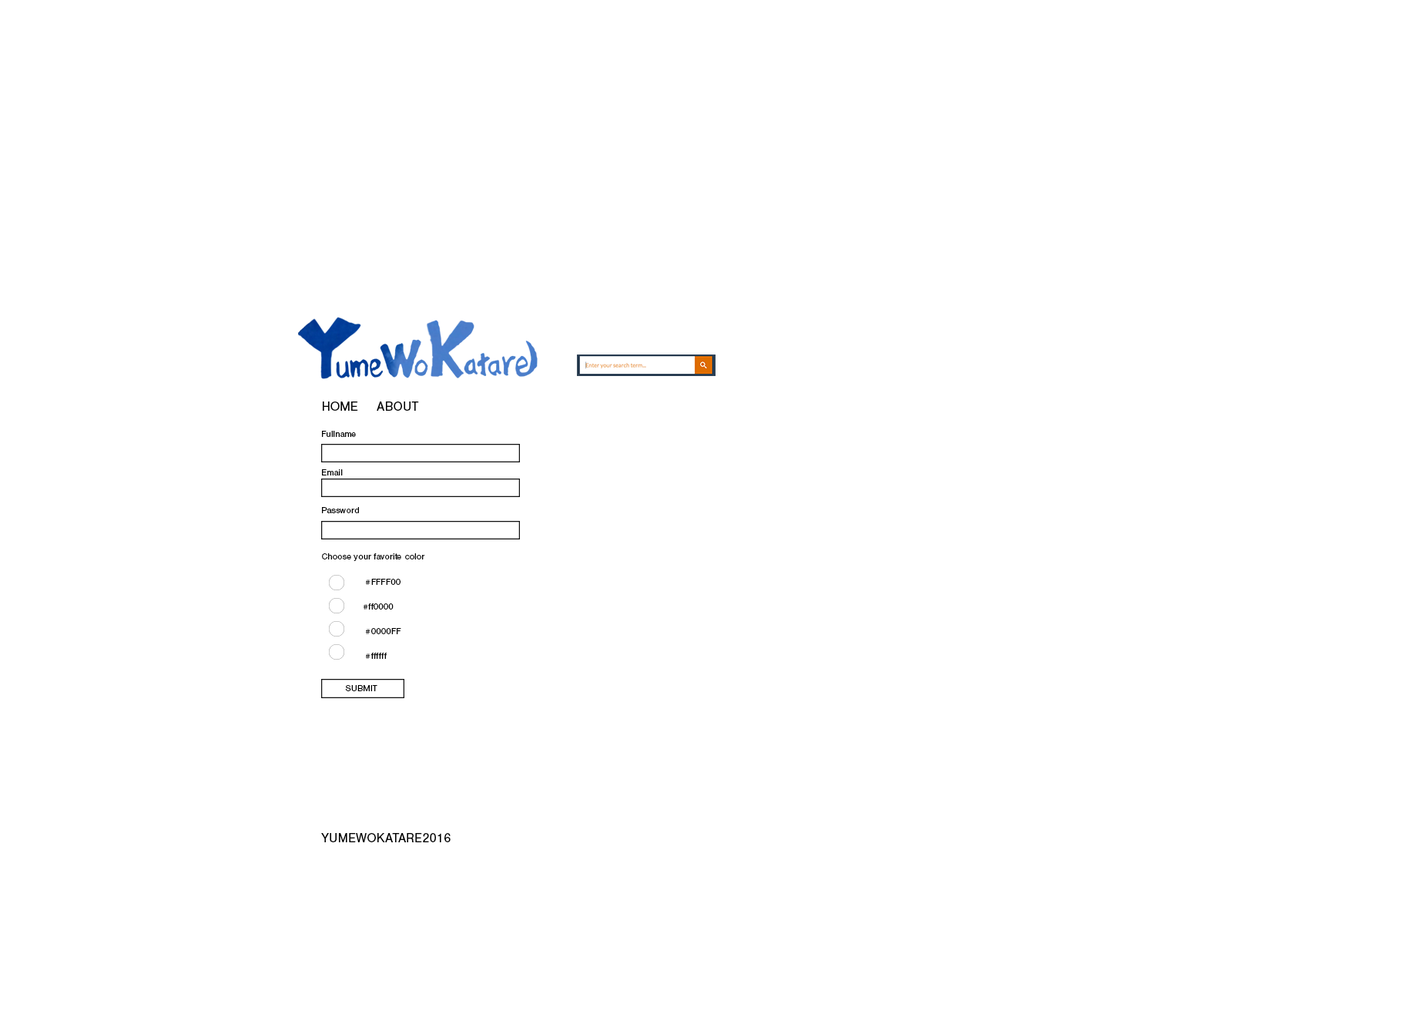
<style>
.page{position:relative;width:1428px;height:1028px;background:#ffffff}
.page>*{position:absolute;margin:0}
.t1{font:12.8px "NimbusSan-Reg";color:#000000}
.t2{font:9px "NimbusSan-Reg";color:#000000}
.t3{font:9px/24.7px "NimbusSan-Reg";color:#000000}
.t4{font:9px/19.3px "NimbusSan-Reg";color:#000000}
</style>
<div class="page">
<p class="t1" style="left:323px;top:401px;width:96px;height:10px">HOME  ABOUT</p>
<p class="t2" style="left:322px;top:431px;width:34px;height:6px">Fullname</p>
<p class="t2" style="left:322px;top:469px;width:21px;height:6px">Email</p>
<p class="t2" style="left:322px;top:507px;width:37px;height:6px">Password</p>
<p class="t2" style="left:322px;top:553px;width:103px;height:8px">Choose your favorite color</p>
<p class="t3" style="left:363px;top:579px;width:38px;height:80px"><span class="t4"> </span>#FFFF00<br>#ff0000<br> #0000FF<br> #ffffff</p>
<p class="t2" style="left:345px;top:685px;width:32px;height:6px">SUBMIT</p>
<p class="t1" style="left:321px;top:833px;width:130px;height:9px">YUMEWOKATARE2016</p>
</div>
